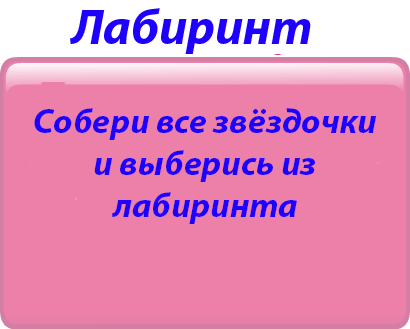
<style>
.page{position:relative;width:410px;height:329px;background:#ec80a9}
.page>*{position:absolute;margin:0}
.t1{font:50px "MyriadPro-BoldIt";color:#1e00fe}
.t2{font:35px "MyriadPro-BoldIt";color:#1e00fe}
</style>
<div class="page">
<p class="t1" style="left:70px;top:8px;width:241px;height:46px">Лабиринт</p>
<p class="t2" style="left:34px;top:108px;width:342px;height:116px;text-align:center">Собери все звёздочки и выберись из лабиринта</p>
</div>
